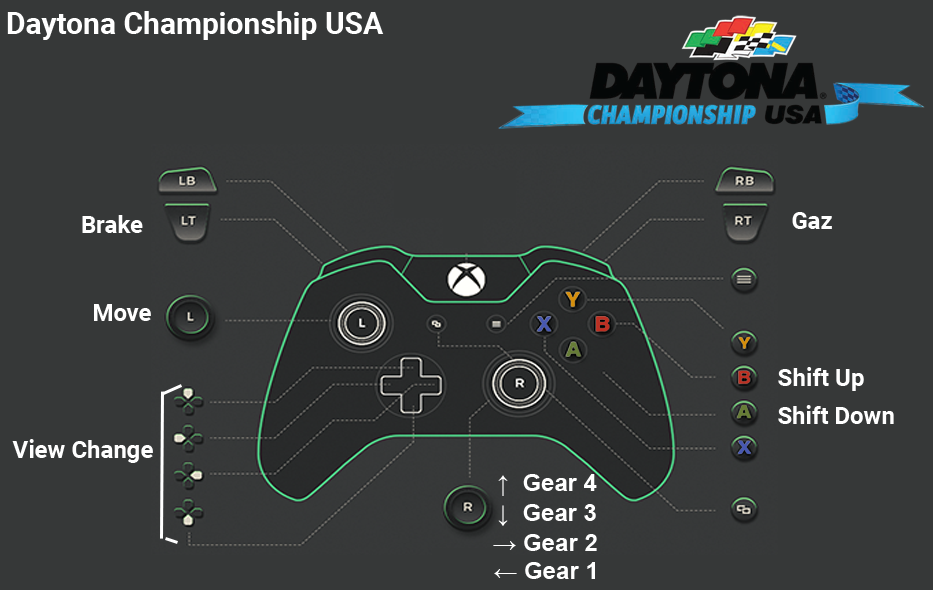
<style>
.page{position:relative;width:933px;height:590px;background:#363838}
.page>*{position:absolute;margin:0}
.t1{font:30px "Roboto-Bold";color:#ffffff}
.t2{font:24px "Roboto-Bold";color:#ffffff}
.t3{font:24px "Arial-BoldMT";color:#ffffff}
</style>
<div class="page">
<p class="t1" style="left:7px;top:11px;width:377px;height:29px">Daytona Championship USA</p>
<p class="t2" style="left:82px;top:215px;width:61px;height:18px">Brake</p>
<p class="t2" style="left:792px;top:212px;width:40px;height:17px">Gaz</p>
<p class="t2" style="left:94px;top:304px;width:57px;height:17px">Move</p>
<p class="t2" style="left:778px;top:367px;width:86px;height:24px">Shift Up</p>
<p class="t2" style="left:778px;top:405px;width:116px;height:19px">Shift Down</p>
<p class="t2" style="left:12px;top:439px;width:141px;height:24px">View Change</p>
<p class="t3" style="left:498px;top:474px;width:99px;height:22px">↑  Gear 4</p>
<p class="t3" style="left:498px;top:504px;width:98px;height:22px">↓  Gear 3</p>
<p class="t3" style="left:493px;top:534px;width:104px;height:17px">→ Gear 2</p>
<p class="t3" style="left:494px;top:562px;width:101px;height:17px">← Gear 1</p>
</div>
